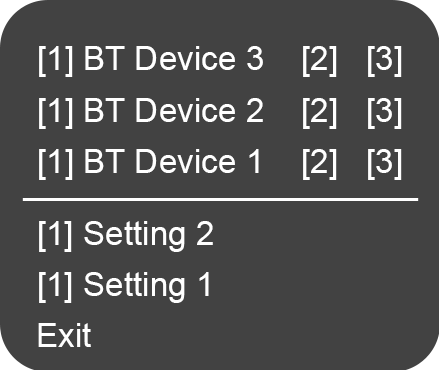
<style>
.page{position:relative;width:439px;height:370px;background:#424242}
.page>*{position:absolute;margin:0}
.t1{font:33.3px "ArialMT";color:#ffffff}
</style>
<div class="page">
<p class="t1" style="left:39px;top:46px;width:363px;height:31px">[1] BT Device 3    [2]   [3]</p>
<p class="t1" style="left:39px;top:98px;width:363px;height:31px">[1] BT Device 2    [2]   [3]</p>
<p class="t1" style="left:39px;top:149px;width:363px;height:31px">[1] BT Device 1    [2]   [3]</p>
<p class="t1" style="left:39px;top:221px;width:174px;height:31px">[1] Setting 2</p>
<p class="t1" style="left:39px;top:272px;width:170px;height:31px">[1] Setting 1</p>
<p class="t1" style="left:38px;top:323px;width:53px;height:24px">Exit</p>
</div>
